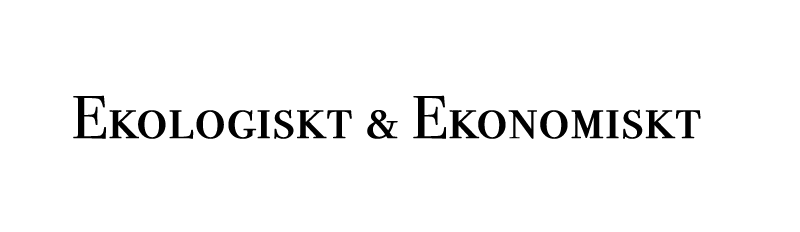
<style>
.page{position:relative;width:800px;height:232px;background:#ffffff}
.page>*{position:absolute;margin:0}
.t1{font:60px "BodoniSvtyTwoSCITCTTBook";color:#000000;font-weight:bold}
</style>
<div class="page">
<p class="t1" style="left:73px;top:95px;width:628px;height:44px">Ekologiskt &amp; Ekonomiskt</p>
</div>
